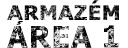
<style>
.page{position:relative;width:128px;height:48px;background:#ffffff}
.page>*{position:absolute;margin:0}
.t1{font:20px "Verdana-Bold";letter-spacing:-0.025em;font-weight:bold}
.t2{font:29.5px "Verdana-Bold";letter-spacing:-0.06em;font-weight:bold}
</style>
<div class="page">
<p class="t1" style="left:7px;top:0px;width:112px;height:20px">ARMAZÉM</p>
<p class="t2" style="left:7px;top:26px;width:112px;height:22px">AREA 1</p>
</div>
